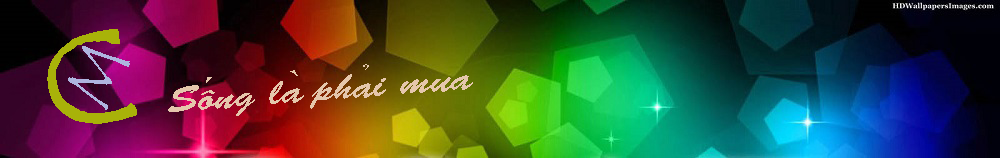
<style>
.page{position:relative;width:1000px;height:158px}
.page>*{position:absolute;margin:0}
.t1{font:200.7px "TempusSansITC";color:#a8b209;scale:1.13 1}
.t2{font:70px "TempusSansITC";color:#aeb5df}
.t3{font:35.9px "BrushScriptStd";color:#e5c7ac;scale:1.2 1}
.t4{font:35.9px "TimesNewRomanPSMT";color:#e5c7ac;scale:1.2 1}
</style>
<div class="page">
<p class="t1" style="left:47px;top:29px;width:90px;height:95px;rotate:-8deg">c</p>
<p class="t2" style="left:68px;top:46px;width:62px;height:64px;rotate:-64deg">M</p>
<p class="t3" style="left:168px;top:64px;width:305px;height:52px;rotate:-4deg">Sô<span class="t4">́</span>ng la<span class="t4">̀ </span>pha<span class="t4">̉</span>i mua</p>
</div>
